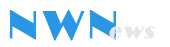
<style>
.page{position:relative;width:170px;height:47px;background:#ffffff}
.page>*{position:absolute;margin:0}
.t1{font:40.8px "Broadway";letter-spacing:0.12em;color:#2a97e4;font-weight:bold;scale:0.96 1}
.t2{font:21.2px "Broadway";letter-spacing:0.1em;color:#e6e6e6;font-weight:bold;font-style:italic}
</style>
<div class="page">
<p class="t1" style="left:9px;top:10px;width:107px;height:31px">NWN</p>
<p class="t2" style="left:109px;top:26px;width:46px;height:13px">ews</p>
</div>
